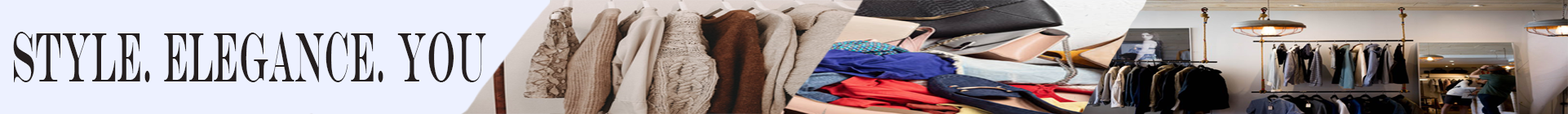
<style>
.page{position:relative;width:1568px;height:114px;background:#edf1ff}
.page>*{position:absolute;margin:0}
.t1{font:71.3px "EngraversMT";color:#241e1e;scale:0.42 1}
</style>
<div class="page">
<p class="t1" style="left:13px;top:32px;width:473px;height:50px">Style. Elegance. You</p>
</div>
